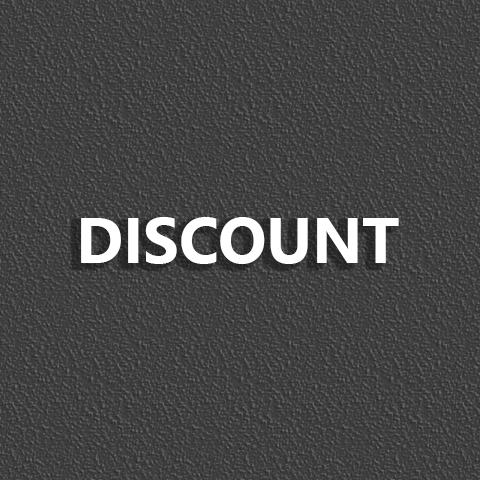
<style>
.page{position:relative;width:480px;height:480px}
.page>*{position:absolute;margin:0}
.t1{font:63.5px "NirmalaUI-Bold";color:#fefefe}
</style>
<div class="page">
<p class="t1" style="left:81px;top:217px;width:318px;height:47px">DISCOUNT</p>
</div>
